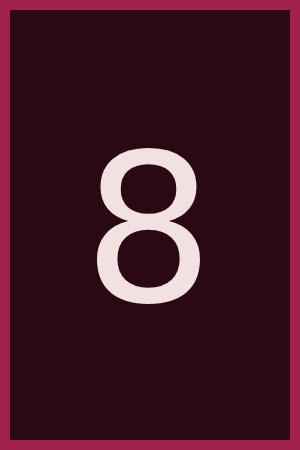
<style>
.page{position:relative;width:300px;height:450px;background:#2a0914}
.page>*{position:absolute;margin:0}
.t1{font:206px "DejaVuSans";color:#f2e1e1}
</style>
<div class="page">
<p class="t1" style="left:96px;top:148px;width:104px;height:156px">8</p>
</div>
